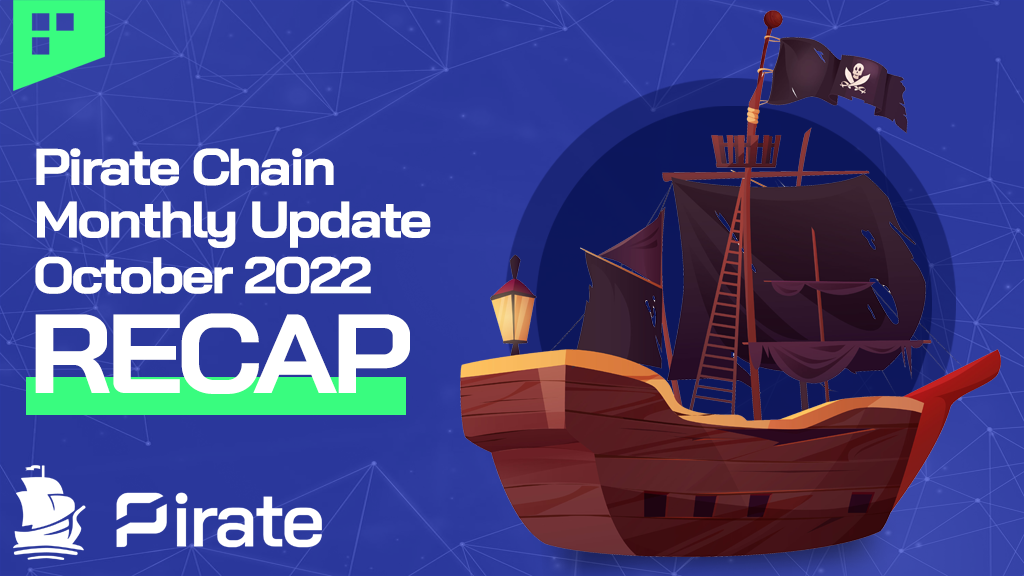
<style>
.page{position:relative;width:1024px;height:576px}
.page>*{position:absolute;margin:0}
.t1{font:51.2px "BaiJamjuree-Bold";letter-spacing:-0.05em;color:#ffffff;scale:1.1 1}
.t2{font:112px "BaiJamjuree-Bold";letter-spacing:-0.05em;color:#ffffff;text-transform:uppercase;scale:1.1 1}
</style>
<div class="page">
<p class="t1" style="left:36px;top:148px;width:298px;height:38px">Pirate Chain</p>
<p class="t1" style="left:37px;top:201px;width:394px;height:47px">Monthly Update</p>
<p class="t1" style="left:35px;top:256px;width:336px;height:38px">October 2022</p>
<p class="t2" style="left:35px;top:313px;width:375px;height:81px">recap</p>
</div>
